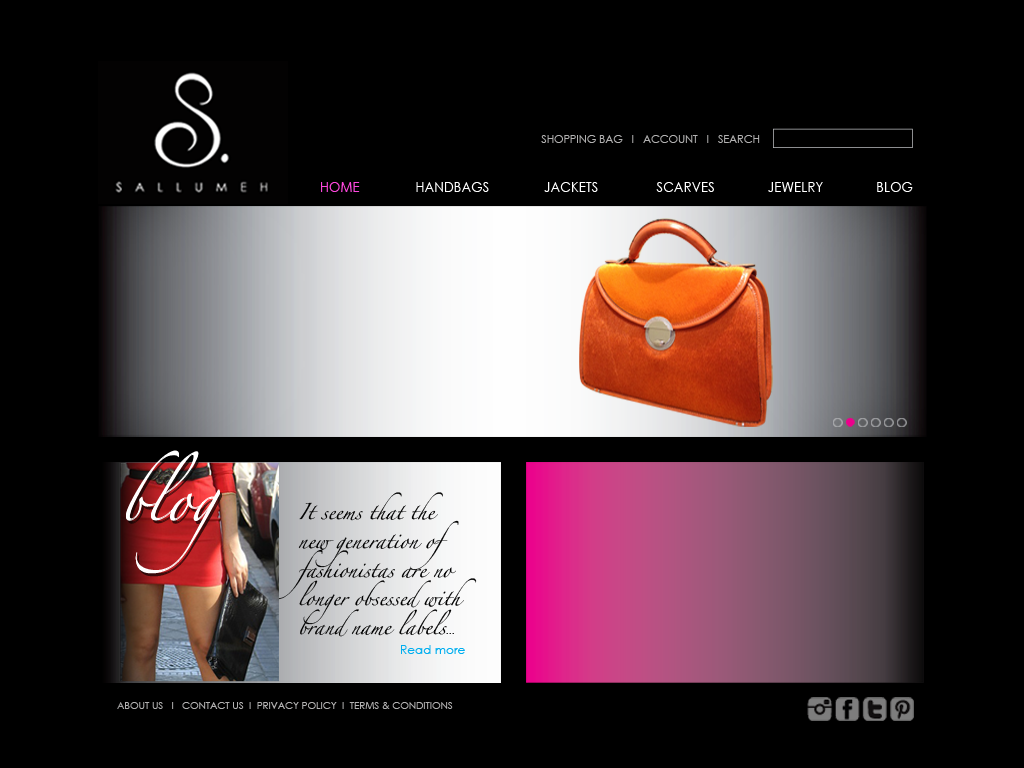
<style>
.page{position:relative;width:1024px;height:768px;background:#000000}
.page>*{position:absolute;margin:0}
.t1{font:10.9px "CenturyGothic";color:#b2b1b1}
.t2{font:14.2px "CenturyGothic";letter-spacing:0.025em;color:#fd48dd;scale:0.9 1}
.t3{font:14.2px "CenturyGothic";letter-spacing:0.025em;color:#ffffff;scale:0.9 1}
.t4{font:14.5px/28.8px "Zapfino";color:#000000}
.t5{font:10.6px/28.8px "CenturyGothic";letter-spacing:0.01em;color:#000000}
.t6{font:12.1px "CenturyGothic";color:#00aeef}
.t7{font:10px "CenturyGothic";color:#b2b1b1}
</style>
<div class="page">
<p class="t1" style="left:541px;top:135px;width:219px;height:8px">SHOPPING BAG   I   ACCOUNT   I   SEARCH</p>
<p class="t2" style="left:321px;top:182px;width:39px;height:10px">HOME</p>
<p class="t3" style="left:416px;top:182px;width:73px;height:10px">HANDBAGS</p>
<p class="t3" style="left:544px;top:182px;width:54px;height:10px">JACKETS</p>
<p class="t3" style="left:656px;top:182px;width:58px;height:10px">SCARVES</p>
<p class="t3" style="left:768px;top:182px;width:55px;height:10px">JEWELRY</p>
<p class="t3" style="left:877px;top:182px;width:36px;height:10px">BLOG</p>
<p class="t4" style="left:274px;top:492px;width:203px;height:145px">It seems that the <br>new generation of <br>fashionistas are no <br>longer obsessed with <br>brand name labels<span class="t5">...</span></p>
<p class="t6" style="left:401px;top:645px;width:64px;height:9px">Read more</p>
<p class="t7" style="left:117px;top:702px;width:336px;height:7px">ABOUT US   I   CONTACT US  I  PRIVACY POLICY  I  TERMS &amp; CONDITIONS</p>
</div>
